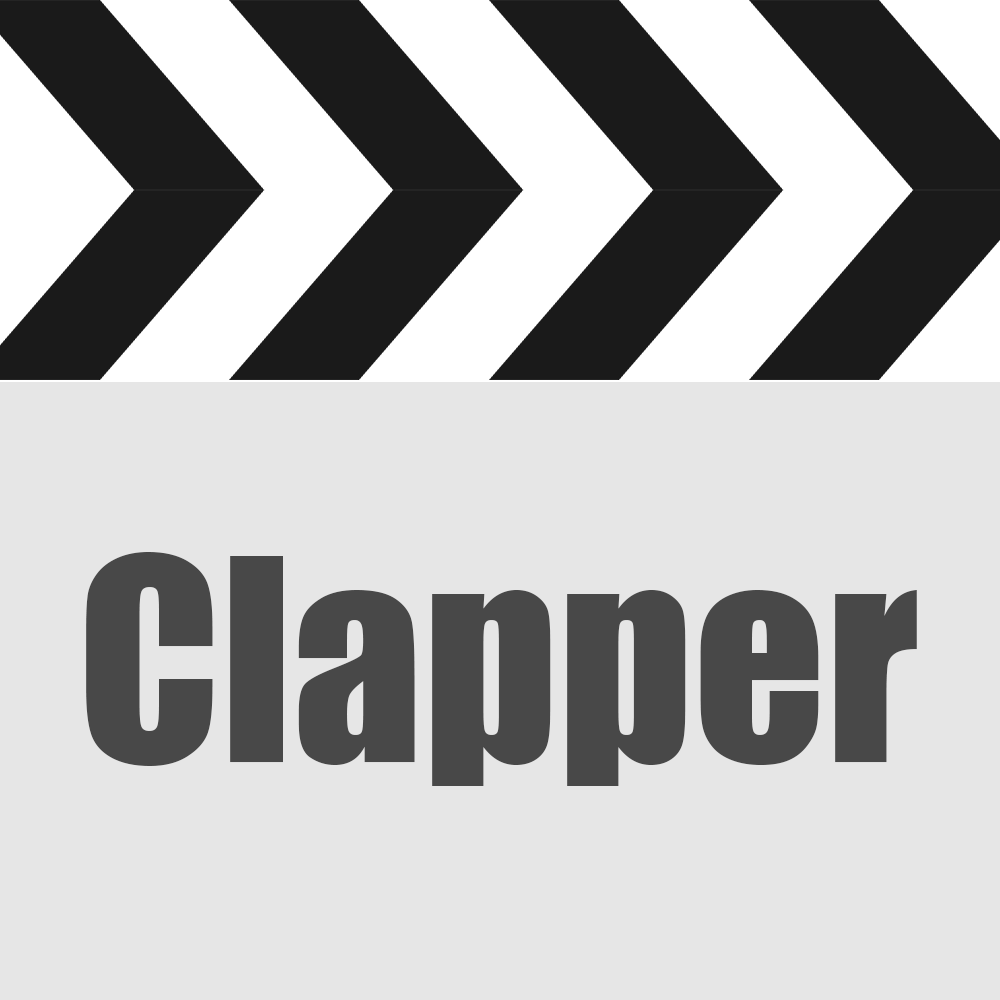
<style>
.page{position:relative;width:1000px;height:1000px;background:#e6e6e6}
.page>*{position:absolute;margin:0}
.t1{font:260px "Impact";color:#484848}
</style>
<div class="page">
<p class="t1" style="left:86px;top:552px;width:831px;height:234px">Clapper</p>
</div>
